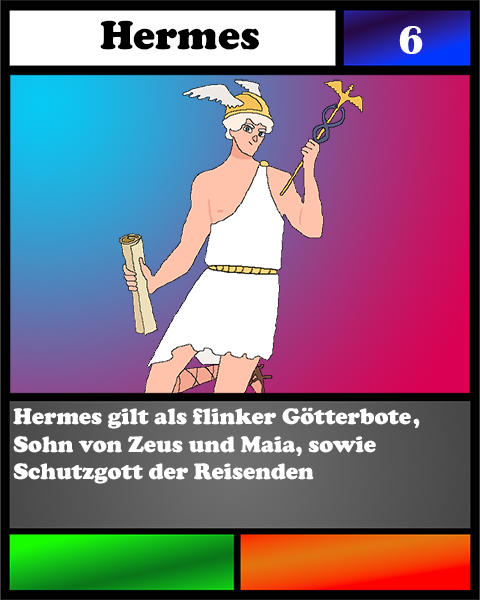
<style>
.page{position:relative;width:480px;height:600px}
.page>*{position:absolute;margin:0}
.t1{font:41.7px "Bauhaus93";color:#42667c}
.t2{font:41.7px "CooperBlack";color:#000000}
.t3{font:41.7px "BritannicBold";color:#ffffff}
.t4{font:23.1px "CooperBlack";color:#ffffff}
</style>
<div class="page">
<p class="t1" style="left:100px;top:20px;width:159px;height:30px;text-align:center"><span class="t2">Hermes<br><br></span><br><br>dwadwawda</p>
<p class="t3" style="left:399px;top:26px;width:24px;height:28px">6</p>
<p class="t4" style="left:13px;top:407px;width:407px;height:77px">Hermes gilt als flinker Götterbote , <br>Sohn von Zeus und Maia, sowie Schutzgott der Reisenden</p>
</div>
